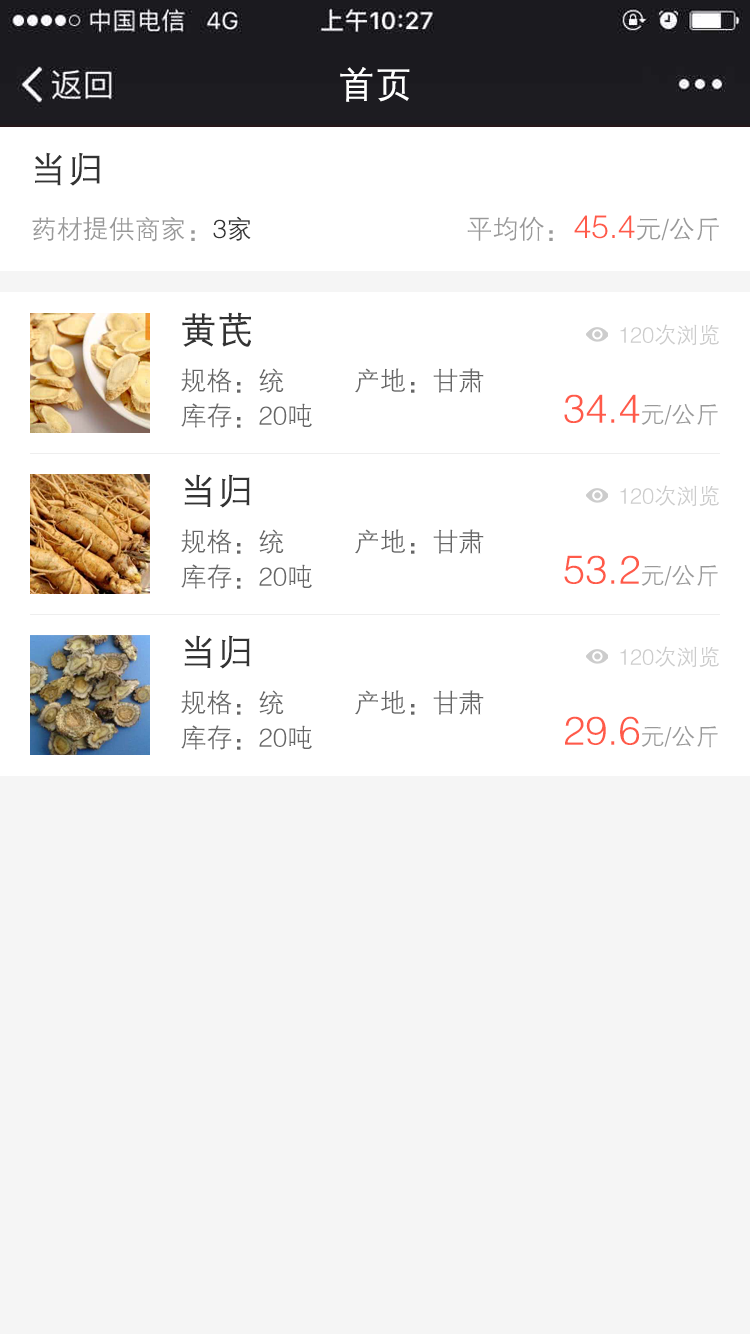
<style>
.page{position:relative;width:750px;height:1334px;background:#f5f5f5}
.page>*{position:absolute;margin:0}
.t1{font:36px "FZZDXJW--GB1-0";color:#ffffff;font-weight:bold}
.t2{font:36px "FZZDXJW--GB1-0";color:#333333;font-weight:bold}
.t3{font:26px "FZZDXJW--GB1-0";color:#999999}
.t4{font:26px "FZZDXJW--GB1-0";color:#333333}
.t5{font:32px "FZZDXJW--GB1-0";color:#ff5a49}
.t6{font:22px "FZZDXJW--GB1-0";color:#cccccc}
.t7{font:26px "FZZDXJW--GB1-0";color:#666666}
.t8{font:40px "FZZDXJW--GB1-0";color:#ff5a49}
.t9{font:24px "FZZDXJW--GB1-0";color:#999999}
</style>
<div class="page">
<p class="t1" style="left:340px;top:67px;width:70px;height:35px">首页</p>
<p class="t2" style="left:35px;top:152px;width:65px;height:34px">当归</p>
<p class="t3" style="left:32px;top:216px;width:219px;height:26px">药材提供商家：<span class="t4">3家</span></p>
<p class="t3" style="left:467px;top:216px;width:86px;height:25px">平均价：</p>
<p class="t5" style="left:574px;top:215px;width:145px;height:26px">45.4<span class="t3">元/公斤</span></p>
<p class="t2" style="left:182px;top:312px;width:69px;height:35px">黄芪</p>
<p class="t6" style="left:620px;top:324px;width:99px;height:22px">120次浏览</p>
<p class="t7" style="left:181px;top:368px;width:103px;height:25px">规格：统</p>
<p class="t7" style="left:355px;top:368px;width:129px;height:25px">产地：甘肃</p>
<p class="t8" style="left:564px;top:394px;width:154px;height:32px">34.4<span class="t9">元/公斤</span></p>
<p class="t7" style="left:181px;top:403px;width:131px;height:25px">库存：20吨</p>
<p class="t2" style="left:184px;top:474px;width:66px;height:34px">当归</p>
<p class="t6" style="left:620px;top:485px;width:99px;height:22px">120次浏览</p>
<p class="t7" style="left:181px;top:529px;width:103px;height:25px">规格：统</p>
<p class="t7" style="left:355px;top:529px;width:129px;height:25px">产地：甘肃</p>
<p class="t8" style="left:564px;top:555px;width:154px;height:32px">53.2<span class="t9">元/公斤</span></p>
<p class="t7" style="left:181px;top:564px;width:131px;height:25px">库存：20吨</p>
<p class="t2" style="left:184px;top:635px;width:66px;height:34px">当归</p>
<p class="t6" style="left:620px;top:646px;width:99px;height:22px">120次浏览</p>
<p class="t7" style="left:181px;top:690px;width:103px;height:25px">规格：统</p>
<p class="t7" style="left:355px;top:690px;width:129px;height:25px">产地：甘肃</p>
<p class="t7" style="left:181px;top:725px;width:131px;height:25px">库存：20吨</p>
<p class="t8" style="left:565px;top:716px;width:153px;height:32px">29.6<span class="t9">元/公斤</span></p>
</div>
